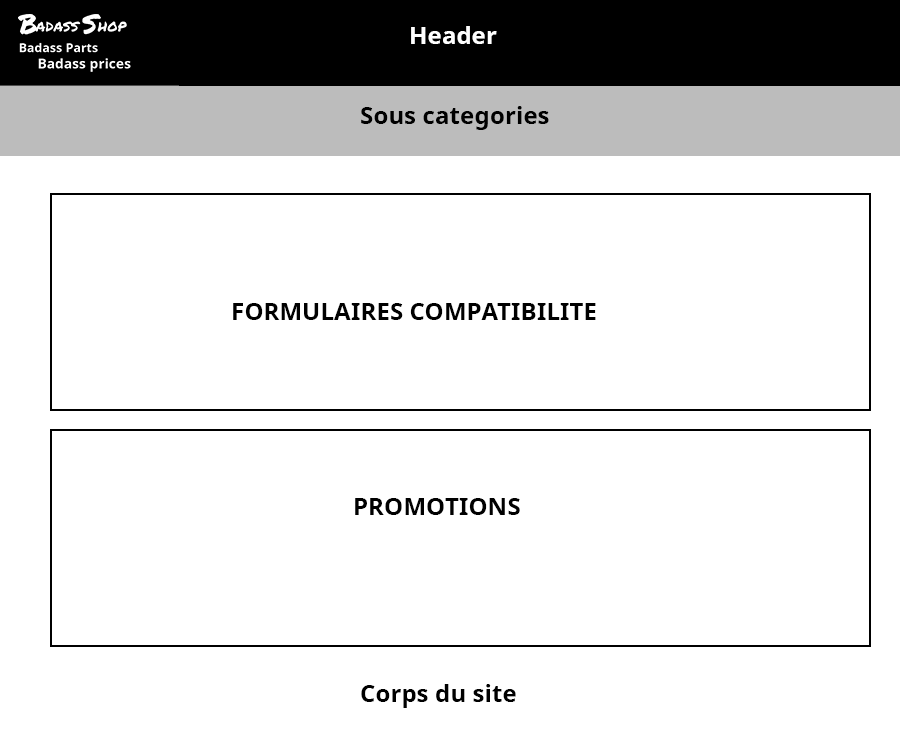
<style>
.page{position:relative;width:900px;height:750px;background:#ffffff}
.page>*{position:absolute;margin:0}
.t1{font:24px "NotoSans-Bold";letter-spacing:0.005em;color:#ffffff}
.t2{font:24px "NotoSans-Bold";letter-spacing:0.005em;color:#000000}
</style>
<div class="page">
<p class="t1" style="left:411px;top:26px;width:86px;height:18px">Header</p>
<p class="t2" style="left:361px;top:106px;width:188px;height:24px">Sous categories</p>
<p class="t2" style="left:233px;top:303px;width:363px;height:17px">FORMULAIRES COMPATIBILITE</p>
<p class="t2" style="left:355px;top:498px;width:165px;height:17px">PROMOTIONS</p>
<p class="t2" style="left:361px;top:684px;width:155px;height:24px">Corps du site</p>
</div>
